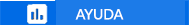
<style>
.page{position:relative;width:189px;height:25px;background:#1c7be8}
.page>*{position:absolute;margin:0}
.t1{font:14.4px "Lato-Regular";color:#fefefe}
</style>
<div class="page">
<p class="t1" style="left:75px;top:9px;width:49px;height:11px">AYUDA</p>
</div>
